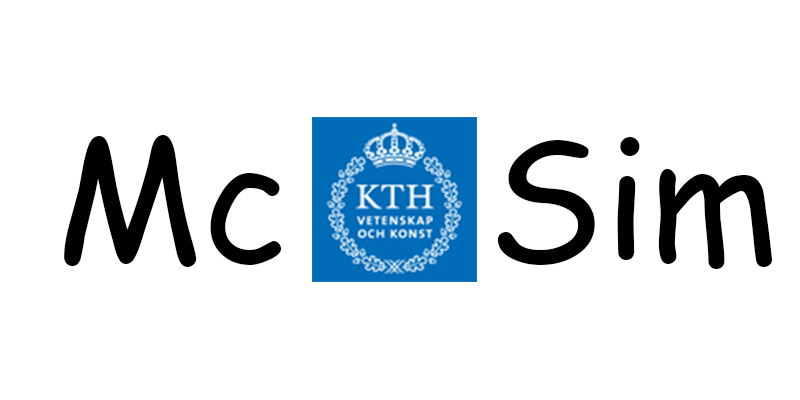
<style>
.page{position:relative;width:800px;height:400px;background:#ffffff}
.page>*{position:absolute;margin:0}
.t1{font:166.7px "ComicSansMS";color:#000000}
</style>
<div class="page">
<p class="t1" style="left:64px;top:135px;width:709px;height:134px">Mc    Sim</p>
</div>
